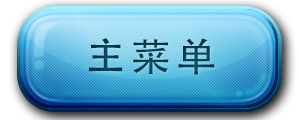
<style>
.page{position:relative;width:300px;height:120px}
.page>*{position:absolute;margin:0}
.t1{font:38.7px "AdobeHeitiStd-Regular";letter-spacing:0.105em;color:#0c3c50;text-transform:uppercase;scale:1.06 1}
</style>
<div class="page">
<p class="t1" style="left:89px;top:38px;width:126px;height:37px">主菜单</p>
</div>
